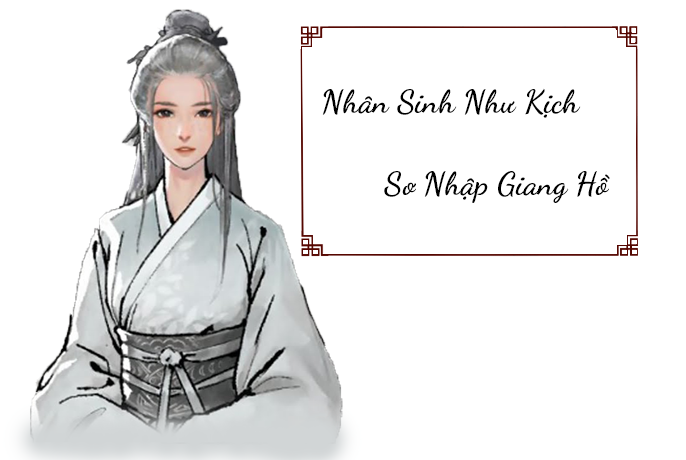
<style>
.page{position:relative;width:686px;height:460px;background:#ffffff}
.page>*{position:absolute;margin:0}
.t1{font:32px "SVN-DancingScript";letter-spacing:0.005em;color:#000000}
</style>
<div class="page">
<p class="t1" style="left:322px;top:88px;width:259px;height:30px">Nhân Sinh Như Kịch</p>
<p class="t1" style="left:384px;top:171px;width:226px;height:32px">Sơ Nhập Giang Hồ</p>
</div>
